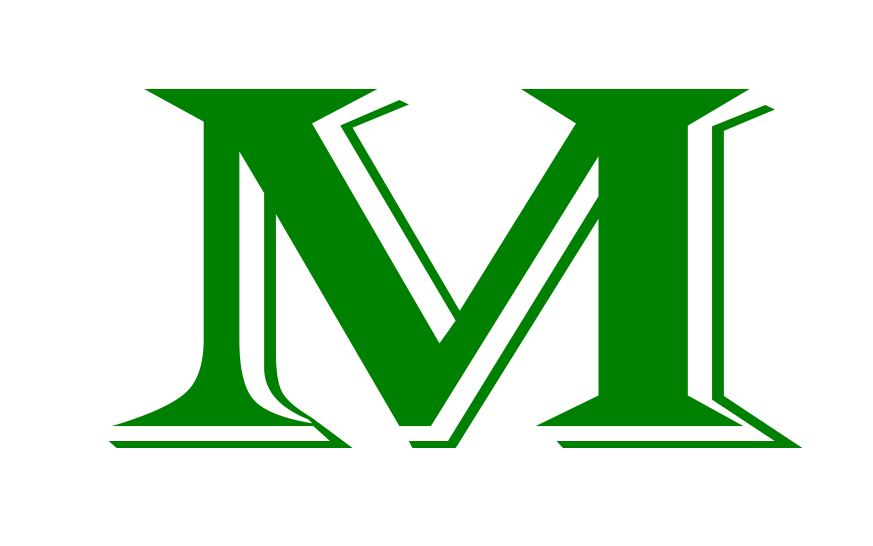
<style>
.page{position:relative;width:873px;height:546px;background:#ffffff}
.page>*{position:absolute;margin:0}
.t1{font:538.1px "Algerian";color:#008000;scale:1.72 1}
</style>
<div class="page">
<p class="t1" style="left:108px;top:88px;width:695px;height:360px">M</p>
</div>
